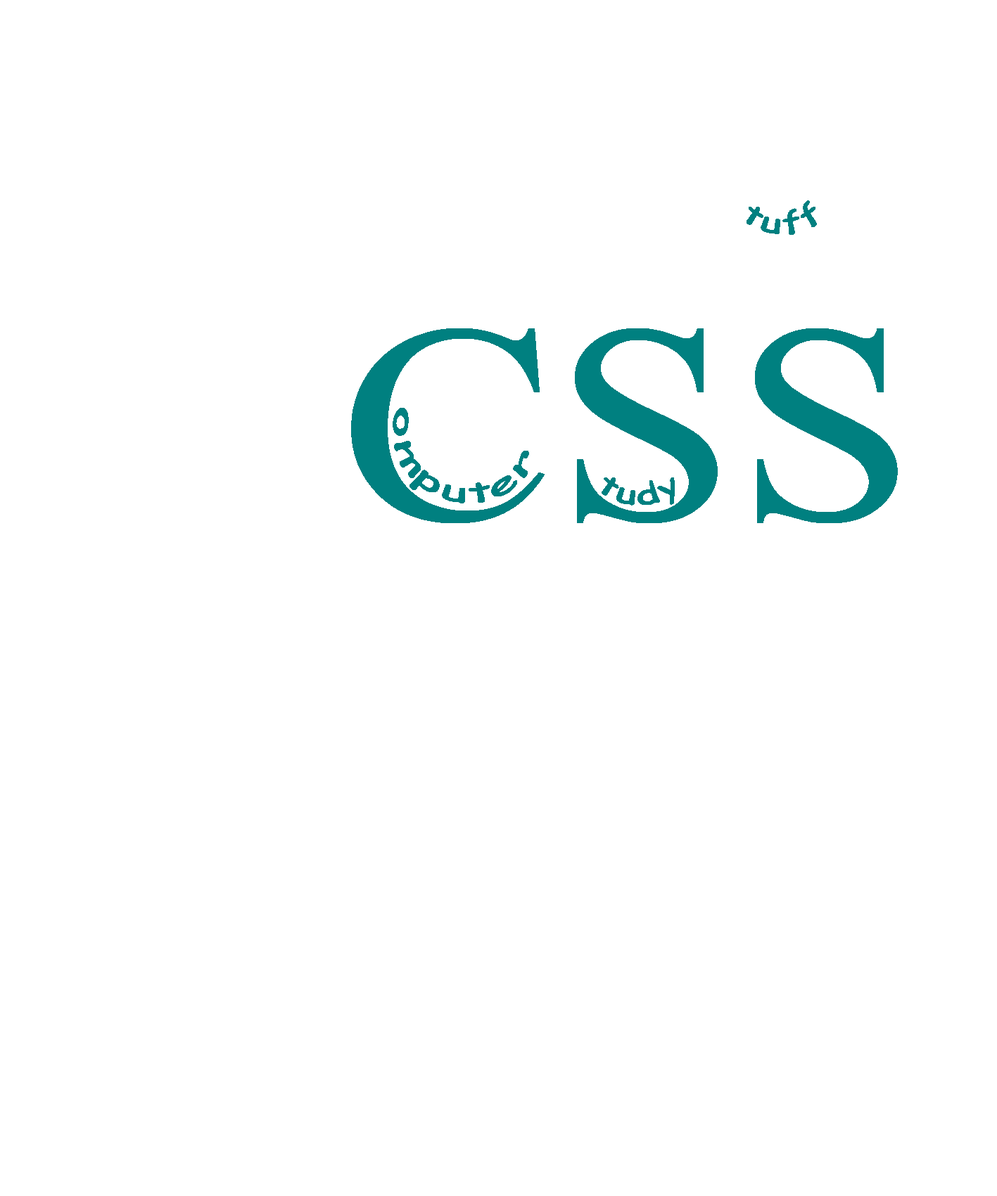
<style>
.page{position:relative;width:997px;height:1196px;background:#ffffff}
.page>*{position:absolute;margin:0}
.t1{font:28.1px "ComicSansMS";color:#008080;scale:0.9 1}
.t2{font:281.3px "TimesNewRomanPSMT";color:#008080;scale:1.15 1}
</style>
<div class="page">
<p class="t1" style="left:746px;top:200px;width:71px;height:35px">tuff</p>
<p class="t2" style="left:351px;top:328px;width:546px;height:195px">CSS</p>
<p class="t1" style="left:392px;top:408px;width:137px;height:96px;rotate:19deg">omputer</p>
<p class="t1" style="left:601px;top:478px;width:74px;height:28px">tudy</p>
</div>
